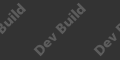
<style>
.page{position:relative;width:120px;height:60px;background:#333333}
.page>*{position:absolute;margin:0}
.t1{font:14px "DorisPFC-Bold";color:#5c5c5c}
</style>
<div class="page">
<p class="t1" style="left:33px;top:2px;width:53px;height:55px;rotate:-45deg">Dev Build</p>
</div>
